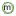
<style>
.page{position:relative;width:16px;height:16px;background:#ffffff}
.page>*{position:absolute;margin:0}
.t1{font:9px "FranklinGothic-Medium";color:#333333}
</style>
<div class="page">
<p class="t1" style="left:4px;top:5px;width:7px;height:5px">m</p>
</div>
